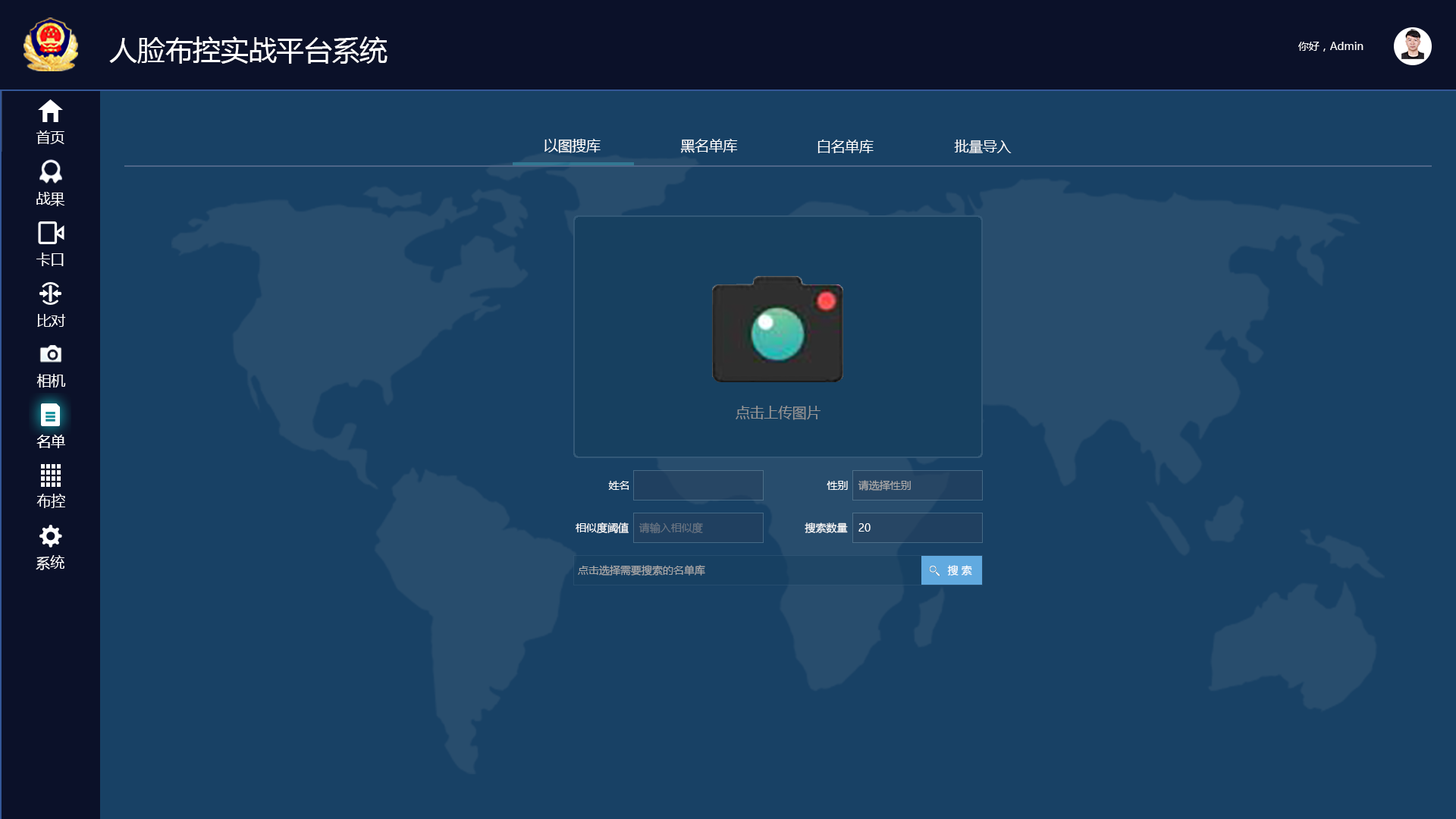
<style>
.page{position:relative;width:1456px;height:819px;background:#184165}
.page>*{position:absolute;margin:0}
.t1{font:10.6px "MicrosoftYaHei";color:#ffffff}
.t2{font:14.2px "MicrosoftYaHei";color:#ffffff}
.t3{font:14.2px "MicrosoftYaHei";color:#959595}
.t4{font:10.6px "MicrosoftYaHei";color:#a9a9a9}
.t5{font:10.6px "MicrosoftYaHei";color:#687482}
</style>
<div class="page">
<p class="t1" style="left:1298px;top:42px;width:65px;height:10px">你好，Admin</p>
<p class="t2" style="left:544px;top:139px;width:57px;height:14px">以图搜库</p>
<p class="t2" style="left:680px;top:139px;width:58px;height:14px">黑名单库</p>
<p class="t2" style="left:817px;top:140px;width:57px;height:13px">白名单库</p>
<p class="t2" style="left:954px;top:140px;width:58px;height:13px">批量导入</p>
<p class="t3" style="left:736px;top:406px;width:85px;height:14px">点击上传图片</p>
<p class="t1" style="left:608px;top:481px;width:21px;height:9px">姓名</p>
<p class="t1" style="left:827px;top:481px;width:21px;height:9px">性别</p>
<p class="t4" style="left:858px;top:480px;width:53px;height:11px">请选择性别</p>
<p class="t1" style="left:576px;top:522px;width:53px;height:12px">相似度阈值</p>
<p class="t5" style="left:639px;top:522px;width:64px;height:12px">请输入相似度</p>
<p class="t1" style="left:805px;top:522px;width:43px;height:11px">搜索数量</p>
<p class="t1" style="left:858px;top:523px;width:13px;height:9px">20</p>
<p class="t4" style="left:578px;top:565px;width:127px;height:11px">点击选择需要搜索的名单库</p>
<p class="t1" style="left:947px;top:565px;width:25px;height:11px">搜 索</p>
</div>
